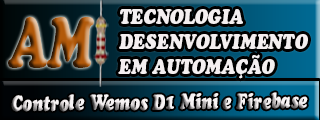
<style>
.page{position:relative;width:320px;height:120px}
.page>*{position:absolute;margin:0}
.t1{font:70.5px "CooperBlackStd-Italic";scale:0.69 1}
.t2{font:20.6px "CooperBlackStd-Italic";color:#f4eff0;scale:0.85 1}
.t3{font:21.8px "CooperBlackStd-Italic";scale:0.75 1}
</style>
<div class="page">
<p class="t1" style="left:8px;top:17px;width:86px;height:51px">AM</p>
<p class="t2" style="left:118px;top:9px;width:190px;height:70px">TECNOLOGIA<br>DESENVOLVIMENTO<br>EM AUTOMAÇÃO</p>
<p class="t3" style="left:11px;top:92px;width:297px;height:20px;rotate:-1deg">Controle Wemos D1 Mini e Firebase</p>
</div>
